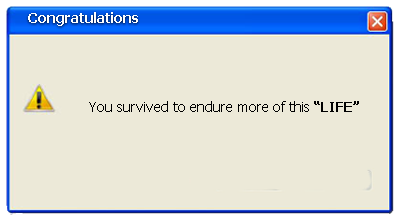
<style>
.page{position:relative;width:400px;height:215px;background:#ece9d8}
.page>*{position:absolute;margin:0}
.t1{font:14px "Tahoma-Bold";color:#fefefe}
.t2{font:14px "Tahoma";color:#000000}
.t3{font:14px "Tahoma-Bold";color:#000000}
</style>
<div class="page">
<p class="t1" style="left:28px;top:12px;width:110px;height:14px">Congratulations</p>
<p class="t2" style="left:89px;top:101px;width:270px;height:11px">You survived to endure more of this <span class="t3">“LIFE”</span></p>
</div>
